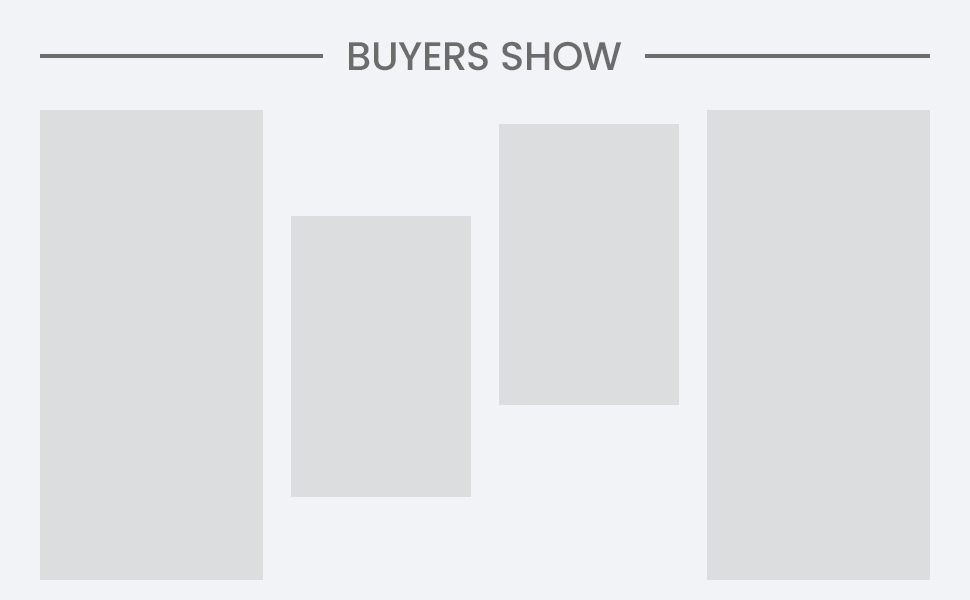
<style>
.page{position:relative;width:970px;height:600px;background:#dcdddf}
.page>*{position:absolute;margin:0}
.t1{font:40px "Poppins-Medium";color:#6c6c6c;text-transform:uppercase}
</style>
<div class="page">
<p class="t1" style="left:349px;top:41px;width:273px;height:30px">BUYERS SHOW</p>
</div>
